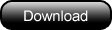
<style>
.page{position:relative;width:112px;height:30px;background:#000000}
.page>*{position:absolute;margin:0}
.t1{font:14.7px "ArialMT";color:#ffffff}
</style>
<div class="page">
<p class="t1" style="left:24px;top:10px;width:64px;height:12px">Download</p>
</div>
